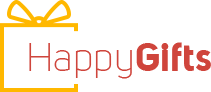
<style>
.page{position:relative;width:211px;height:92px;background:#ffffff}
.page>*{position:absolute;margin:0}
.t1{font:40px "UniSansLight";color:#cf453c}
.t2{font:40px "UniSansBold";color:#cf453c}
</style>
<div class="page">
<p class="t1" style="left:29px;top:42px;width:182px;height:37px">Happy<span class="t2">Gifts</span></p>
</div>
